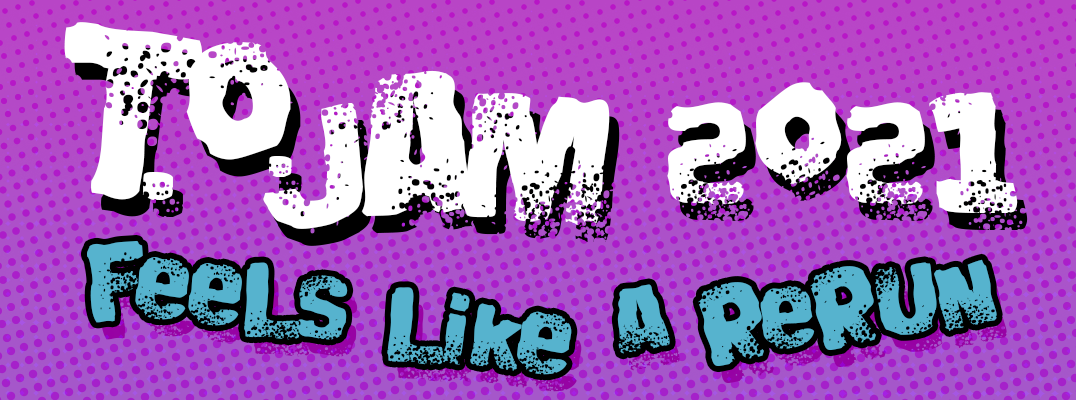
<style>
.page{position:relative;width:1076px;height:400px}
.page>*{position:absolute;margin:0}
.t1{font:342.2px "BigBlokeBB";color:#ffffff}
.t2{font:256.7px "BigBlokeBB";color:#ffffff}
.t3{font:231px "BigBlokeBB";color:#ffffff}
.t4{font:200px "BigBlokeBB";color:#ffffff}
.t5{font:222.4px "BigBlokeBB";color:#ffffff}
.t6{font:154px "BigBlokeBB";color:#ffffff}
.t7{font:205.3px "BigBlokeBB";color:#ffffff}
.t8{font:125px "BigBlokeBB";color:#56b3ce}
</style>
<div class="page">
<p class="t1" style="left:64px;top:22px;width:139px;height:178px">T</p>
<p class="t2" style="left:186px;top:42px;width:105px;height:118px">O</p>
<p class="t3" style="left:361px;top:70px;width:119px;height:147px">A</p>
<p class="t4" style="left:667px;top:82px;width:351px;height:131px">2021</p>
<p class="t3" style="left:463px;top:93px;width:147px;height:132px">M</p>
<p class="t5" style="left:263px;top:103px;width:101px;height:126px">J</p>
<p class="t6" style="left:268px;top:156px;width:24px;height:21px">.</p>
<p class="t7" style="left:142px;top:172px;width:31px;height:28px">.</p>
<p class="t8" style="left:87px;top:240px;width:261px;height:100px;rotate:6deg">feels</p>
<p class="t8" style="left:698px;top:259px;width:299px;height:108px;rotate:-8deg">rerun</p>
<p class="t8" style="left:387px;top:287px;width:185px;height:88px;rotate:8deg">like</p>
<p class="t8" style="left:617px;top:284px;width:53px;height:70px;rotate:-11deg">a</p>
</div>
